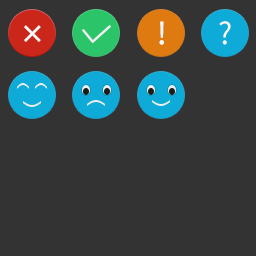
<style>
.page{position:relative;width:256px;height:256px;background:#333333}
.page>*{position:absolute;margin:0}
.t1{font:36px "MicrosoftYaHei";color:#f9f9f9}
.t2{font:30px "SourceHanSansCN-Regular";color:#f9f9f9;font-weight:bold}
.t3{font:30px "SourceHanSansCN-Regular";color:#f9f9f9}
</style>
<div class="page">
<p class="t1" style="left:24px;top:25px;width:17px;height:17px">×</p>
<p class="t2" style="left:159px;top:21px;width:5px;height:24px">!</p>
<p class="t3" style="left:219px;top:21px;width:12px;height:24px">?</p>
</div>
